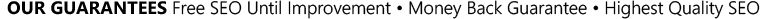
<style>
.page{position:relative;width:767px;height:19px;background:#ffffff}
.page>*{position:absolute;margin:0}
.t1{font:17.9px "NirmalaUI-Semilight";color:#000000}
.t2{font:17.9px "NirmalaUI-Bold";color:#000000}
</style>
<div class="page">
<p class="t1" style="left:7px;top:0px;width:753px;height:19px"><span class="t2">OUR GUARANTEES </span>Free SEO Until Improvement • Money Back Guarantee • Highest Quality SEO</p>
</div>
